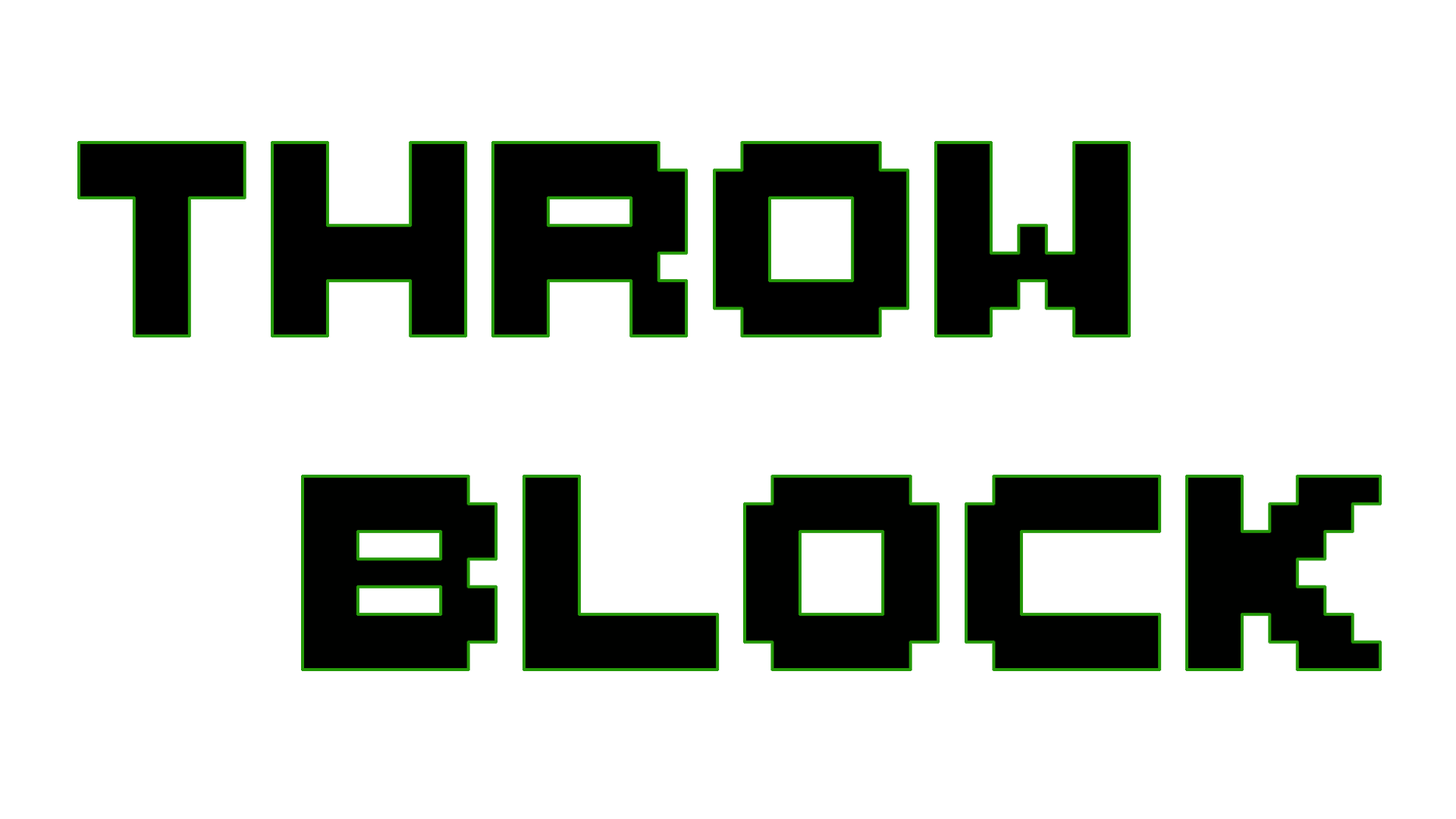
<style>
.page{position:relative;width:1456px;height:819px;background:#ffffff}
.page>*{position:absolute;margin:0}
.t1{font:442.4px "ThaleahFat";color:#000000}
.t2{font:442.4px "ThaleahFat";color:#000100}
</style>
<div class="page">
<p class="t1" style="left:79px;top:142px;width:1051px;height:194px">THROW</p>
<p class="t2" style="left:303px;top:475px;width:1078px;height:195px">Block</p>
</div>
